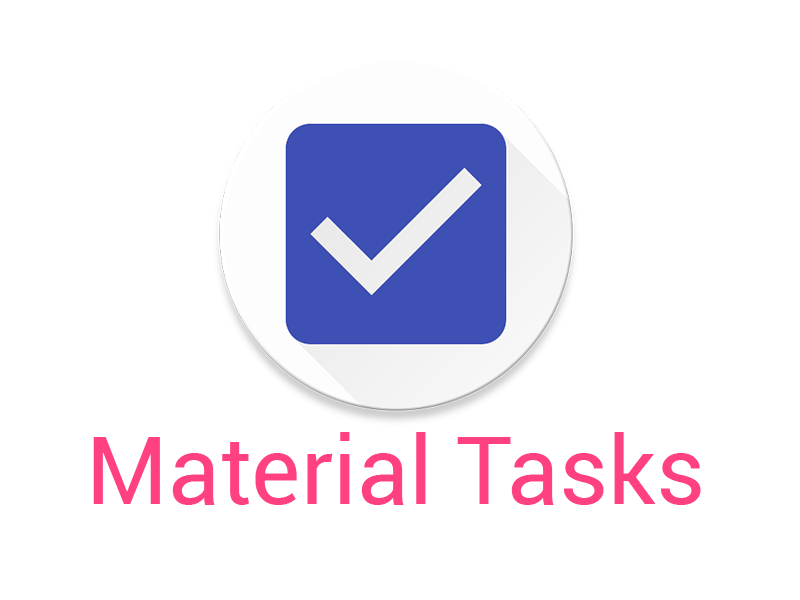
<style>
.page{position:relative;width:800px;height:600px;background:#ffffff}
.page>*{position:absolute;margin:0}
.t1{font:94px "Roboto-Regular";color:#ff4081}
</style>
<div class="page">
<p class="t1" style="left:93px;top:432px;width:608px;height:73px">Material Tasks</p>
</div>
